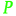
<style>
.page{position:relative;width:16px;height:16px;background:#ffffff}
.page>*{position:absolute;margin:0}
.t1{font:18.7px "FangSong_GB2312";color:#24ff00;text-transform:uppercase;font-weight:bold;font-style:italic}
</style>
<div class="page">
<p class="t1" style="left:3px;top:0px;width:10px;height:14px">P</p>
</div>
